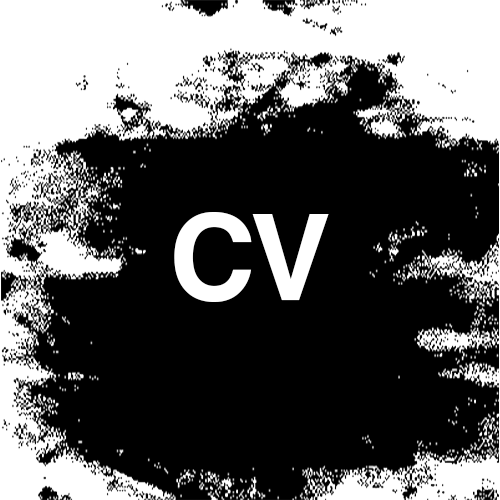
<style>
.page{position:relative;width:500px;height:500px;background:#000000}
.page>*{position:absolute;margin:0}
.t1{font:119.6px "Helvetica-Bold";letter-spacing:-0.05em;color:#ffffff}
</style>
<div class="page">
<p class="t1" style="left:174px;top:212px;width:155px;height:90px">CV</p>
</div>
